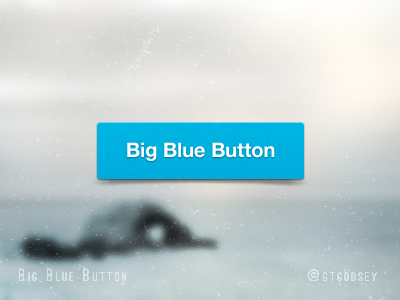
<style>
.page{position:relative;width:400px;height:300px}
.page>*{position:absolute;margin:0}
.t1{font:20px "HelveticaNeue-Bold";color:#fefeff}
.t2{font:18px "OstrichSans-Medium";letter-spacing:0.2em;color:#d7e0e3;font-variant:small-caps}
.t3{font:18px "OstrichSans-Medium";letter-spacing:0.2em;color:#dbe4e5;font-variant:small-caps}
</style>
<div class="page">
<p class="t1" style="left:127px;top:142px;width:148px;height:19px">Big Blue Button</p>
<p class="t2" style="left:19px;top:268px;width:107px;height:13px">Big Blue Button</p>
<p class="t3" style="left:307px;top:269px;width:70px;height:12px">@gtgodsey</p>
</div>
